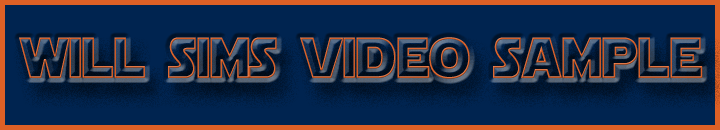
<style>
.page{position:relative;width:720px;height:130px;background:#002450}
.page>*{position:absolute;margin:0}
.t1{font:57.4px "StarJediHollow";color:#dd6026;scale:0.87 1}
</style>
<div class="page">
<p class="t1" style="left:19px;top:37px;width:684px;height:42px">will sims video sample</p>
</div>
